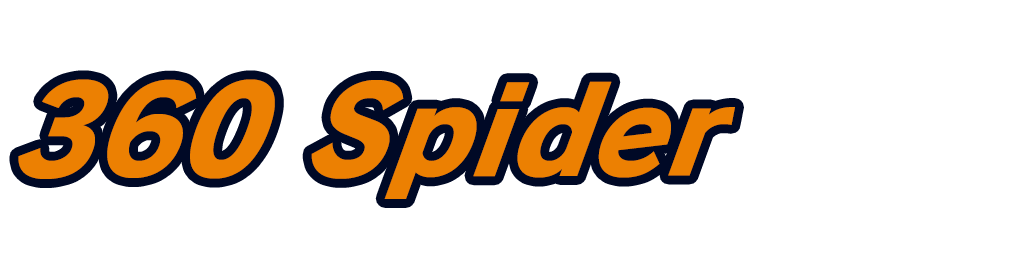
<style>
.page{position:relative;width:1024px;height:256px;background:#ffffff}
.page>*{position:absolute;margin:0}
.t1{font:128px "RodinPro-EB";letter-spacing:0.001em;color:#ec8002;scale:0.94 1}
</style>
<div class="page">
<p class="t1" style="left:18px;top:79px;width:717px;height:120px">360 Spider</p>
</div>
